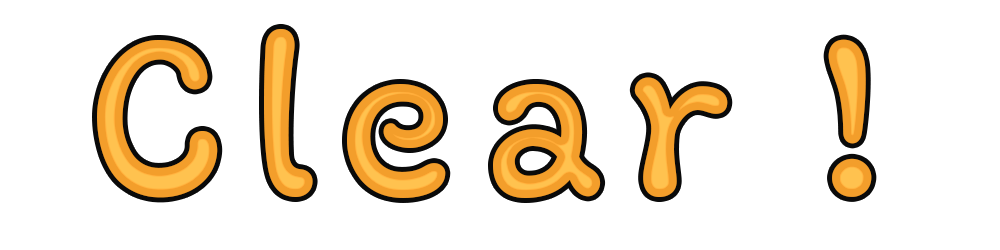
<style>
.page{position:relative;width:1000px;height:250px;background:#ffffff}
.page>*{position:absolute;margin:0}
.t1{font:224.7px "MoolongChocolate-Regular";letter-spacing:0.075em;color:#f39e2b}
</style>
<div class="page">
<p class="t1" style="left:97px;top:28px;width:775px;height:170px">Clear！</p>
</div>
